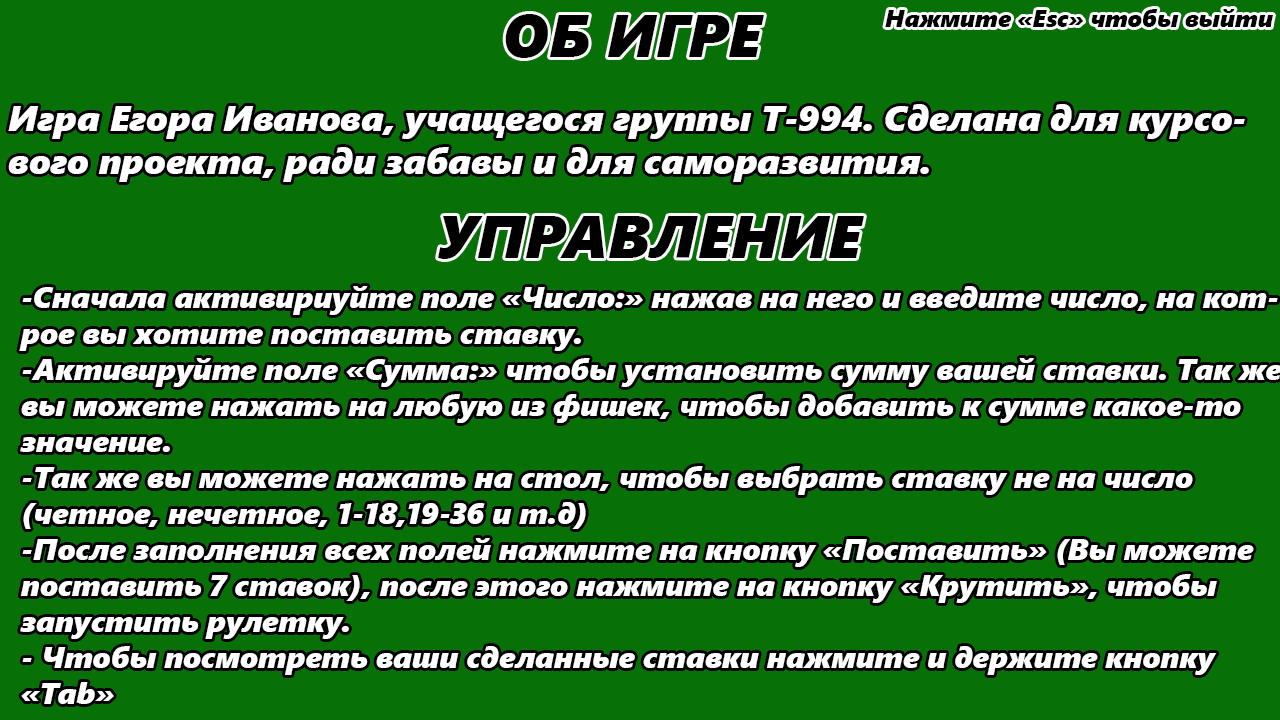
<style>
.page{position:relative;width:1280px;height:720px;background:#077007}
.page>*{position:absolute;margin:0}
.t1{font:60px "SegoeUIBlack-Italic";color:#000000}
.t2{font:24px "SegoeUIBlack-Italic";color:#000000}
.t3{font:36px "SegoeUIBlack-Italic";color:#fefefe}
.t4{font:30px "SegoeUIBlack-Italic";color:#ffffff}
</style>
<div class="page">
<p class="t1" style="left:505px;top:14px;width:259px;height:44px">ОБ ИГРЕ</p>
<p class="t2" style="left:885px;top:9px;width:388px;height:18px">Нажмите «Esc» чтобы выйти</p>
<p class="t3" style="left:8px;top:104px;width:1237px;height:78px">Игра Егора Иванова, учащегося группы Т-994. Сделана для курсо-<br>вого проекта, ради забавы и для саморазвития.</p>
<p class="t1" style="left:438px;top:216px;width:426px;height:43px">УПРАВЛЕНИЕ</p>
<p class="t4" style="left:19px;top:286px;width:1263px;height:418px">-Сначала активириуйте поле «Число:» нажав на него и введите число, на кот-<br>рое вы хотите поставить ставку.<br>-Активируйте поле «Сумма:» чтобы установить сумму вашей ставки. Так же<br>вы можете нажать на любую из фишек, чтобы добавить к сумме какое-то<br>значение.<br>-Так же вы можете нажать на стол, чтобы выбрать ставку не на число<br>(четное, нечетное, 1-18,19-36 и т.д)<br>-После заполнения всех полей нажмите на кнопку «Поставить» (Вы можете<br>поставить 7 ставок), после этого нажмите на кнопку «Крутить», чтобы <br>запустить рулетку.<br>- Чтобы посмотреть ваши сделанные ставки нажмите и держите кнопку<br>«Tab»</p>
</div>
